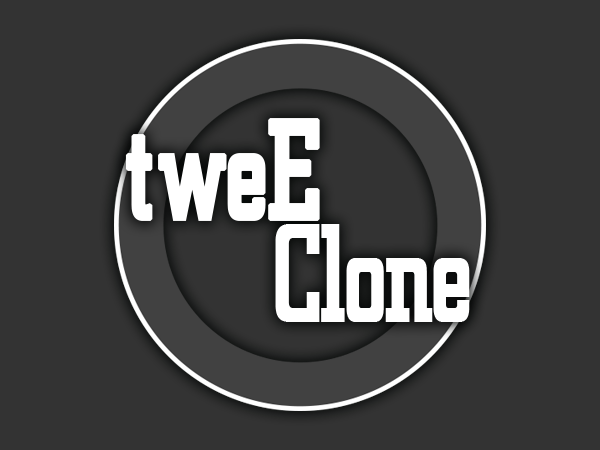
<style>
.page{position:relative;width:600px;height:450px;background:#333333}
.page>*{position:absolute;margin:0}
.t1{font:138.9px "ACityNova";letter-spacing:-0.02em;color:#ffffff;font-weight:bold;scale:0.74 1}
.t2{font:138.9px "ACityNova";letter-spacing:0.06em;color:#ffffff;font-weight:bold;scale:0.74 1}
.t3{font:135.1px "ACityNova";letter-spacing:-0.04em;color:#ffffff;font-weight:bold;scale:0.74 1}
.t4{font:135.1px "ACityNova";letter-spacing:-0.02em;color:#ffffff;font-weight:bold;scale:0.74 1}
</style>
<div class="page">
<p class="t1" style="left:125px;top:118px;width:195px;height:103px"><span class="t2">t</span>weE</p>
<p class="t3" style="left:275px;top:224px;width:195px;height:98px"><span class="t4">C</span>lone</p>
</div>
